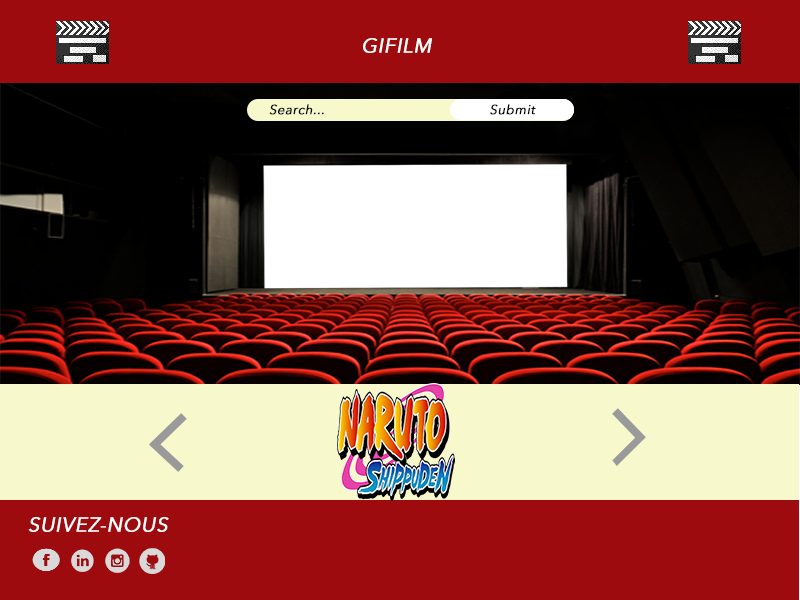
<style>
.page{position:relative;width:800px;height:600px;background:#9e0b0f}
.page>*{position:absolute;margin:0}
.t1{font:20px "AvenirNextLTPro-Regular";letter-spacing:0.02em;color:#ffffff;font-weight:bold;font-style:italic}
.t2{font:13px "AvenirNextLTPro-Regular";letter-spacing:0.02em;color:#050505;font-weight:bold;font-style:italic}
</style>
<div class="page">
<p class="t1" style="left:363px;top:38px;width:69px;height:15px">GIFILM</p>
<p class="t2" style="left:269px;top:104px;width:55px;height:11px">Search...</p>
<p class="t2" style="left:490px;top:104px;width:46px;height:11px">Submit</p>
<p class="t1" style="left:28px;top:517px;width:141px;height:15px">SUIVEZ-NOUS</p>
</div>
